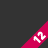
<style>
.page{position:relative;width:48px;height:48px;background:#333333}
.page>*{position:absolute;margin:0}
.t1{font:11px "DIN-Black";color:#ffffff;text-transform:uppercase}
</style>
<div class="page">
<p class="t1" style="left:33px;top:31px;width:13px;height:12px;rotate:-45deg">12</p>
</div>
